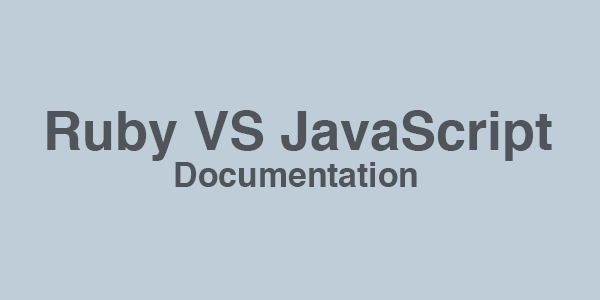
<style>
.page{position:relative;width:600px;height:300px;background:#bfcdd9}
.page>*{position:absolute;margin:0}
.t1{font:54px "Helvetica-Bold";color:#50555b}
.t2{font:33.8px "Helvetica-Bold";color:#50555b}
</style>
<div class="page">
<p class="t1" style="left:47px;top:110px;width:505px;height:51px">Ruby VS JavaScript</p>
<p class="t2" style="left:175px;top:162px;width:242px;height:25px">Documentation</p>
</div>
